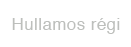
<style>
.page{position:relative;width:131px;height:47px;background:#ffffff}
.page>*{position:absolute;margin:0}
.t1{font:16.9px "Helvetica";letter-spacing:0.025em;color:#bdbfbc}
</style>
<div class="page">
<p class="t1" style="left:12px;top:18px;width:108px;height:16px">Hullamos régi</p>
</div>
